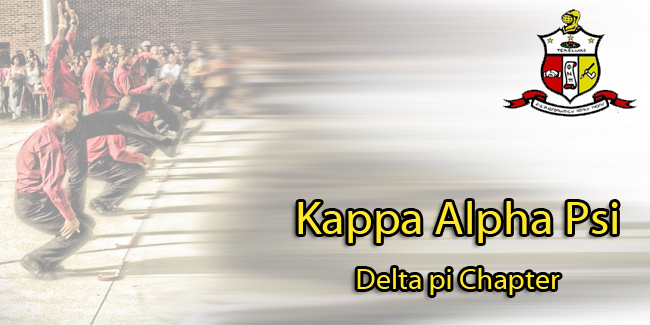
<style>
.page{position:relative;width:650px;height:325px}
.page>*{position:absolute;margin:0}
.t1{font:29px "MyriadWebPro";color:#ffe82a}
.t2{font:47px "MyriadWebPro";color:#ffe82a}
</style>
<div class="page">
<p class="t1" style="left:298px;top:201px;width:320px;height:94px;text-align:center"><span class="t2">Kappa Alpha Psi <br></span>Delta pi Chapter</p>
</div>
